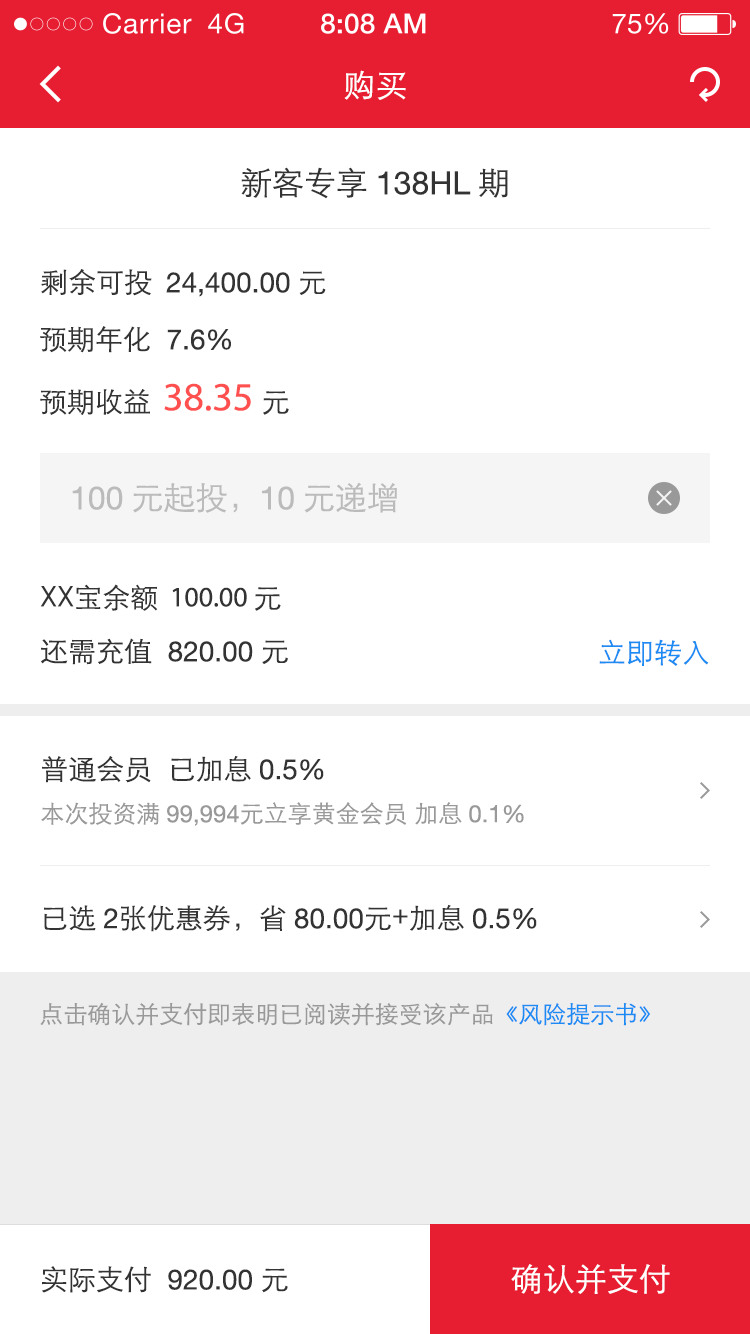
<style>
.page{position:relative;width:750px;height:1334px;background:#ffffff}
.page>*{position:absolute;margin:0}
.t1{font:32px "STXihei";color:#ffffff}
.t2{font:32px "HelveticaNeue";color:#333333}
.t3{font:32px "STXihei";color:#333333}
.t4{font:28px "HelveticaNeue";color:#333333}
.t5{font:28px "STXihei";color:#333333}
.t6{font:40px "MyriadPro-Regular";color:#ff5050}
.t7{font:32px "STXihei";color:#bbbbbb}
.t8{font:32px "HelveticaNeue";color:#bbbbbb}
.t9{font:28px "MyriadPro-Regular";color:#333333}
.t10{font:28px "STXihei";color:#1c8bf3}
.t11{font:24px "STXihei";color:#999999}
.t12{font:24px "HelveticaNeue";color:#999999}
.t13{font:24px "STXihei";color:#1c8bf3}
</style>
<div class="page">
<p class="t1" style="left:344px;top:70px;width:62px;height:30px">购买</p>
<p class="t2" style="left:241px;top:167px;width:267px;height:32px"><span class="t3">新客专享</span>138HL<span class="t3">期</span></p>
<p class="t4" style="left:41px;top:269px;width:285px;height:28px"><span class="t5">剩余可投  </span>24,400.00 <span class="t5">元</span></p>
<p class="t5" style="left:40px;top:326px;width:191px;height:27px">预期年化<span class="t4">  7.6%</span></p>
<p class="t6" style="left:40px;top:383px;width:249px;height:32px"><span class="t5">预期收益  </span>38.35 <span class="t5">元</span></p>
<p class="t7" style="left:72px;top:482px;width:325px;height:31px"><span class="t8">100</span>元起投，<span class="t8">10</span>元递增</p>
<p class="t9" style="left:40px;top:584px;width:241px;height:27px"><span class="t5">XX宝余额</span>  100.00 <span class="t5">元</span></p>
<p class="t4" style="left:41px;top:638px;width:247px;height:27px"><span class="t5">还需充值</span>  820.00 <span class="t5">元</span></p>
<p class="t10" style="left:599px;top:639px;width:110px;height:27px">立即转入</p>
<p class="t5" style="left:42px;top:755px;width:282px;height:28px">普通会员  已加息 <span class="t4">0.5%</span></p>
<p class="t11" style="left:41px;top:802px;width:483px;height:24px">本次投资满 <span class="t12">99,994</span>元立享黄金会员 加息 <span class="t12">0.1%</span></p>
<p class="t5" style="left:44px;top:904px;width:493px;height:28px">已选 <span class="t4">2</span>张优惠券，省 <span class="t4">80.00</span>元+加息 <span class="t4">0.5%</span></p>
<p class="t11" style="left:40px;top:1002px;width:610px;height:24px">点击确认并支付即表明已阅读并接受该产品<span class="t13">《风险提示书》</span></p>
<p class="t1" style="left:511px;top:1264px;width:159px;height:30px">确认并支付</p>
<p class="t4" style="left:42px;top:1266px;width:246px;height:27px"><span class="t5">实际支付</span>  920.00 <span class="t5">元</span></p>
</div>
